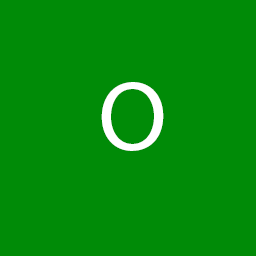
<style>
.page{position:relative;width:256px;height:256px;background:#008b07}
.page>*{position:absolute;margin:0}
.t1{font:100px "MyriadPro-Regular";color:#ffffff}
</style>
<div class="page">
<p class="t1" style="left:101px;top:82px;width:63px;height:69px">O</p>
</div>
